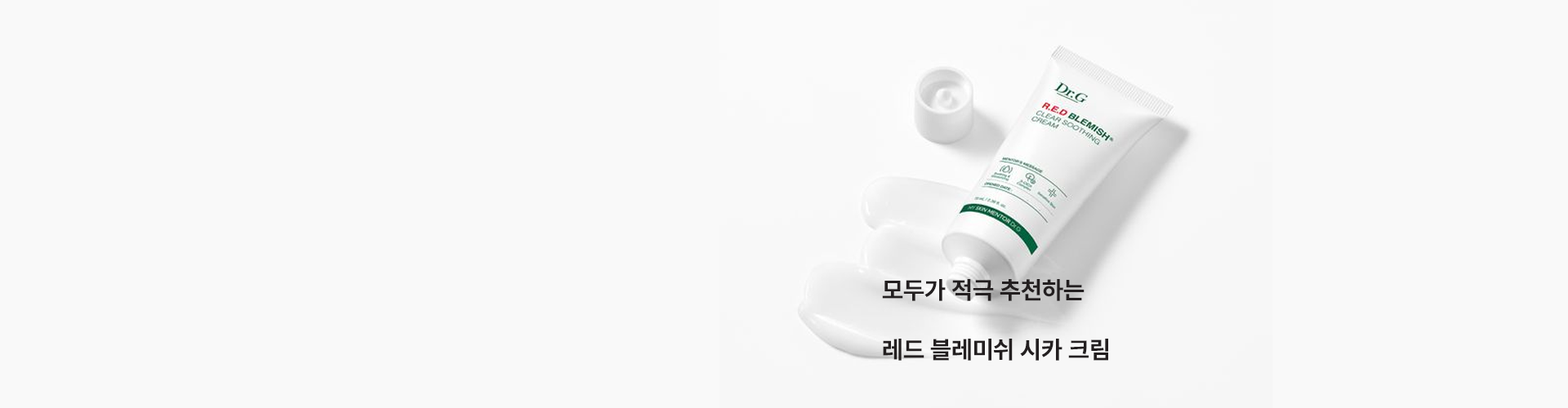
<style>
.page{position:relative;width:1568px;height:408px;background:#f9f9f9}
.page>*{position:absolute;margin:0}
.t1{font:24.5px "Pretendard-Bold";color:#231f20}
</style>
<div class="page">
<p class="t1" style="left:882px;top:279px;width:203px;height:22px">모두가 적극 추천하는</p>
<p class="t1" style="left:883px;top:339px;width:225px;height:22px">레드 블레미쉬 시카 크림</p>
</div>
